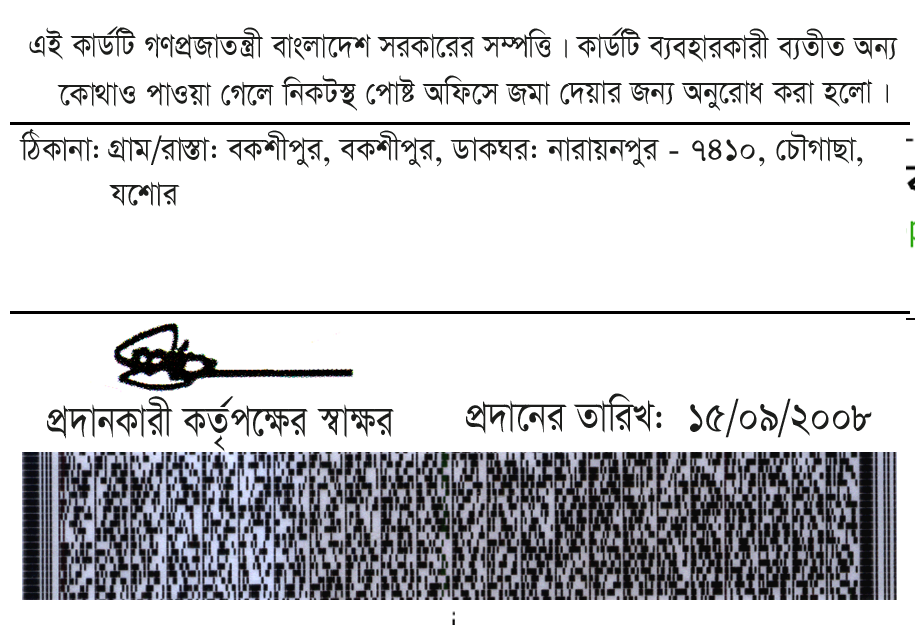
<style>
.page{position:relative;width:915px;height:625px;background:#ffffff}
.page>*{position:absolute;margin:0}
.t1{font:37.5px "SutonnyMJ";color:#1c1d1b;scale:0.88 1}
.t2{font:37.5px "SutonnyMJ";color:#1c1d1b;scale:0.9 1}
.t3{font:37.5px "SutonnyMJ";color:#1c1d1b;scale:0.94 1}
.t4{font:50.2px "SutonnyMJ";color:#1c1d1b;scale:0.81 1}
.t5{font:48.7px "SutonnyMJ";color:#1c1d1b;scale:0.85 1}
</style>
<div class="page">
<p class="t1" style="left:29px;top:26px;width:869px;height:37px">GB KvW©wU MYcÖRvZš¿x evsjv‡`k miKv‡ii m¤úwË| KvW©wU e¨enviKvix e¨ZxZ Ab¨</p>
<p class="t2" style="left:57px;top:75px;width:831px;height:36px">‡Kv_vI cvIqv †M‡j wbKU¯’ †cvó Awd‡m Rgv †`qvi Rb¨ Aby‡iva Kiv n‡jv|</p>
<p class="t3" style="left:19px;top:128px;width:844px;height:40px">wVKvbv: MÖvg/iv¯Ív: eKkxcyi, eKkxcyi, WvKNi: bvivqbcyi - 7410, †PŠMvQv,</p>
<p class="t3" style="left:109px;top:181px;width:71px;height:26px">h‡kvi</p>
<p class="t4" style="left:47px;top:396px;width:347px;height:56px">cÖ`vbKvix KZ…©c‡¶i ¯^v¶i</p>
<p class="t5" style="left:466px;top:393px;width:406px;height:45px">cÖ`v‡bi ZvwiL:  15/09/2008</p>
</div>
